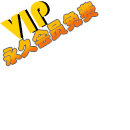
<style>
.page{position:relative;width:130px;height:130px;background:#ffffff}
.page>*{position:absolute;margin:0}
.t1{font:35.5px "STHupo";color:#ffd200;scale:0.95 1}
.t2{font:35.5px "STHupo";scale:0.95 1}
.t3{font:17.5px "STHupo"}
</style>
<div class="page">
<p class="t1" style="left:0px;top:1px;width:48px;height:39px;rotate:-30deg">VIP</p>
<p class="t2" style="left:2px;top:1px;width:48px;height:39px;rotate:-30deg">VIP</p>
<p class="t3" style="left:3px;top:2px;width:95px;height:64px;rotate:-30deg">永久会员免费</p>
</div>
